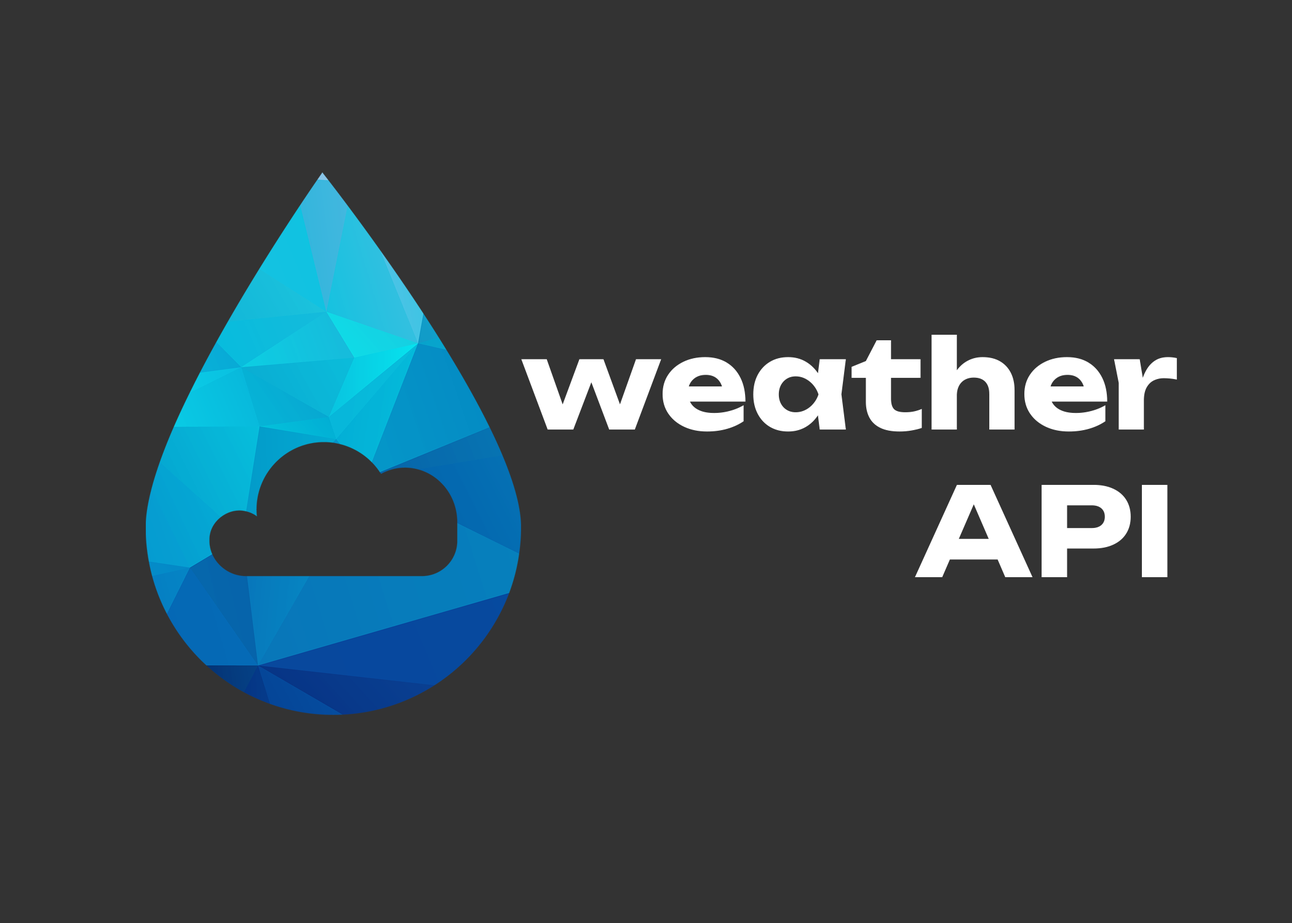
<style>
.page{position:relative;width:1292px;height:923px;background:#333333}
.page>*{position:absolute;margin:0}
.t1{font:123.1px "Unbounded-Bold";color:#ffffff}
</style>
<div class="page">
<p class="t1" style="left:521px;top:335px;width:656px;height:242px;text-align:right">weather<br>API</p>
</div>
